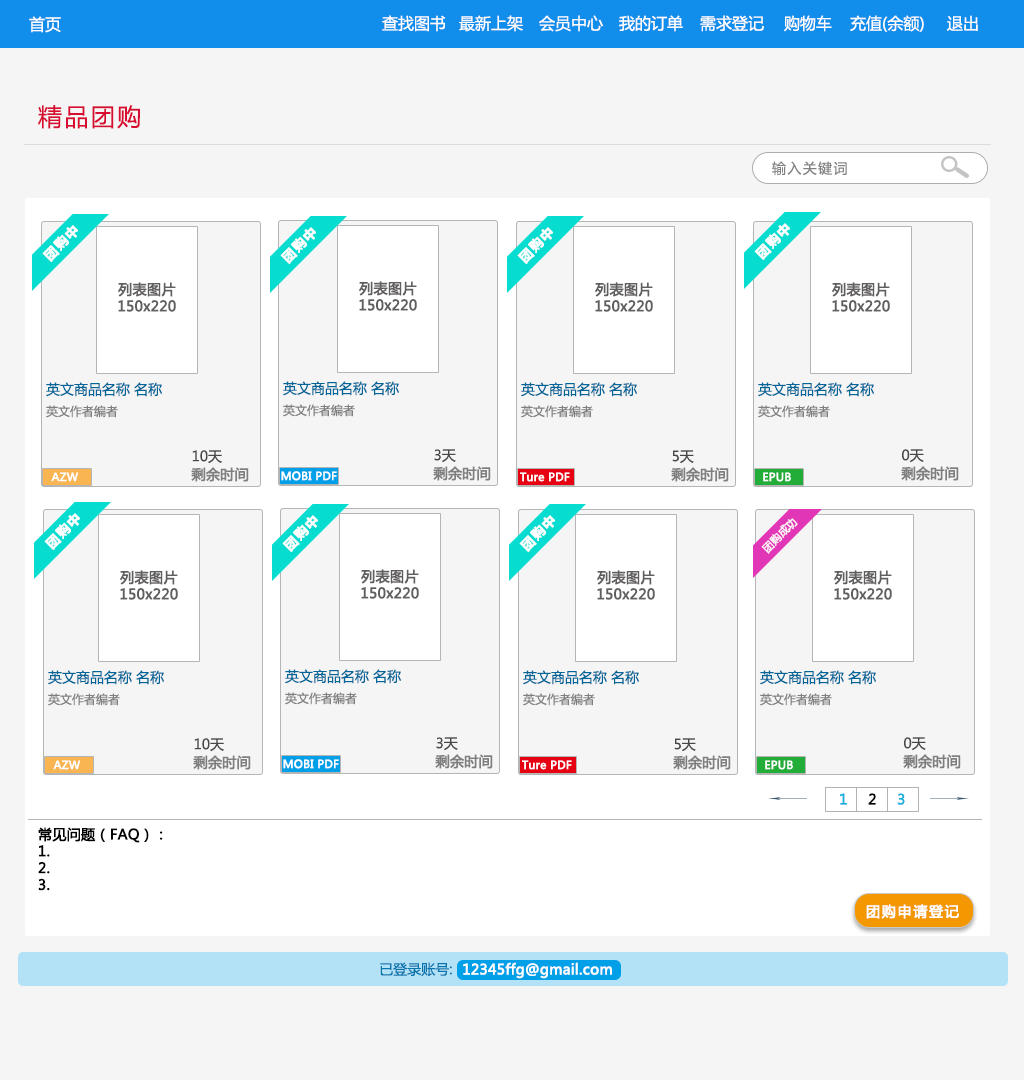
<style>
.page{position:relative;width:1024px;height:1080px;background:#f5f5f5}
.page>*{position:absolute;margin:0}
.t1{font:16px "MicrosoftYaHei";color:#ffffff}
.t2{font:24px "MicrosoftYaHei";letter-spacing:0.1em;color:#d70c30}
.t3{font:14px "MicrosoftYaHei";letter-spacing:0.1em;color:#828282}
.t4{font:13px "MicrosoftYaHei-Bold";letter-spacing:0.1em;color:#fefefe;font-weight:bold}
.t5{font:14px "MicrosoftYaHei";color:#615e5e;font-weight:bold}
.t6{font:14px "MicrosoftYaHei";color:#006699}
.t7{font:12px "MicrosoftYaHei";color:#7e7e7e}
.t8{font:14px "MicrosoftYaHei";color:#474747}
.t9{font:11px "MicrosoftYaHei";color:#ffffff;font-weight:bold}
.t10{font:14px "MicrosoftYaHei";color:#807f7f;font-weight:bold}
.t11{font:10.6px "MicrosoftYaHei";color:#fdfafa;font-weight:bold}
.t12{font:14px "MicrosoftYaHei";color:#19b0dc;font-weight:bold}
.t13{font:14px "MicrosoftYaHei";color:#000000;font-weight:bold}
.t14{font:14px "MicrosoftYaHei";letter-spacing:0.1em;color:#ffffff;font-weight:bold}
.t15{font:14px "MicrosoftYaHei";color:#0875ae}
.t16{font:14px "MicrosoftYaHei";color:#ffffff;font-weight:bold}
</style>
<div class="page">
<p class="t1" style="left:29px;top:16px;width:32px;height:17px">首页</p>
<p class="t1" style="left:382px;top:15px;width:64px;height:17px">查找图书</p>
<p class="t1" style="left:459px;top:15px;width:64px;height:17px">最新上架</p>
<p class="t1" style="left:539px;top:15px;width:64px;height:17px">会员中心</p>
<p class="t1" style="left:619px;top:15px;width:64px;height:17px">我的订单</p>
<p class="t1" style="left:700px;top:15px;width:64px;height:17px">需求登记</p>
<p class="t1" style="left:784px;top:15px;width:48px;height:17px">购物车</p>
<p class="t1" style="left:850px;top:15px;width:74px;height:17px">充值(余额)</p>
<p class="t1" style="left:947px;top:15px;width:31px;height:16px">退出</p>
<p class="t2" style="left:38px;top:105px;width:102px;height:24px">精品团购</p>
<p class="t3" style="left:772px;top:161px;width:75px;height:15px">输入关键词</p>
<p class="t4" style="left:42px;top:225px;width:36px;height:37px;rotate:-45deg">团购中</p>
<p class="t4" style="left:280px;top:227px;width:36px;height:37px;rotate:-45deg">团购中</p>
<p class="t4" style="left:517px;top:227px;width:36px;height:37px;rotate:-45deg">团购中</p>
<p class="t4" style="left:754px;top:223px;width:36px;height:37px;rotate:-45deg">团购中</p>
<p class="t5" style="left:359px;top:281px;width:58px;height:30px;text-align:center">列表图片<br>150x220</p>
<p class="t5" style="left:118px;top:282px;width:58px;height:30px;text-align:center">列表图片<br>150x220</p>
<p class="t5" style="left:595px;top:282px;width:58px;height:30px;text-align:center">列表图片<br>150x220</p>
<p class="t5" style="left:832px;top:282px;width:58px;height:30px;text-align:center">列表图片<br>150x220</p>
<p class="t6" style="left:46px;top:382px;width:116px;height:15px">英文商品名称 名称</p>
<p class="t6" style="left:283px;top:381px;width:116px;height:15px">英文商品名称 名称</p>
<p class="t6" style="left:521px;top:382px;width:116px;height:15px">英文商品名称 名称</p>
<p class="t6" style="left:758px;top:382px;width:116px;height:15px">英文商品名称 名称</p>
<p class="t7" style="left:46px;top:405px;width:72px;height:13px">英文作者编者</p>
<p class="t7" style="left:283px;top:404px;width:72px;height:13px">英文作者编者</p>
<p class="t7" style="left:521px;top:405px;width:72px;height:13px">英文作者编者</p>
<p class="t7" style="left:758px;top:405px;width:72px;height:13px">英文作者编者</p>
<p class="t8" style="left:434px;top:449px;width:22px;height:14px">3天</p>
<p class="t8" style="left:902px;top:449px;width:22px;height:14px">0天</p>
<p class="t8" style="left:192px;top:450px;width:30px;height:14px">10天</p>
<p class="t8" style="left:672px;top:450px;width:22px;height:14px">5天</p>
<p class="t9" style="left:51px;top:472px;width:28px;height:10px">AZW</p>
<p class="t10" style="left:191px;top:467px;width:58px;height:15px">剩余时间</p>
<p class="t9" style="left:281px;top:471px;width:56px;height:10px">MOBI PDF</p>
<p class="t10" style="left:433px;top:466px;width:58px;height:15px">剩余时间</p>
<p class="t9" style="left:520px;top:472px;width:50px;height:10px">Ture PDF</p>
<p class="t10" style="left:671px;top:467px;width:58px;height:15px">剩余时间</p>
<p class="t9" style="left:763px;top:472px;width:28px;height:10px">EPUB</p>
<p class="t10" style="left:901px;top:466px;width:58px;height:15px">剩余时间</p>
<p class="t4" style="left:44px;top:513px;width:36px;height:37px;rotate:-45deg">团购中</p>
<p class="t4" style="left:282px;top:515px;width:36px;height:37px;rotate:-45deg">团购中</p>
<p class="t4" style="left:519px;top:515px;width:36px;height:37px;rotate:-45deg">团购中</p>
<p class="t11" style="left:761px;top:518px;width:37px;height:36px;rotate:-45deg">团购成功</p>
<p class="t5" style="left:361px;top:569px;width:58px;height:30px;text-align:center">列表图片<br>150x220</p>
<p class="t5" style="left:120px;top:570px;width:58px;height:30px;text-align:center">列表图片<br>150x220</p>
<p class="t5" style="left:597px;top:570px;width:58px;height:30px;text-align:center">列表图片<br>150x220</p>
<p class="t5" style="left:834px;top:570px;width:58px;height:30px;text-align:center">列表图片<br>150x220</p>
<p class="t6" style="left:48px;top:670px;width:116px;height:15px">英文商品名称 名称</p>
<p class="t6" style="left:285px;top:669px;width:116px;height:15px">英文商品名称 名称</p>
<p class="t6" style="left:523px;top:670px;width:116px;height:15px">英文商品名称 名称</p>
<p class="t6" style="left:760px;top:670px;width:116px;height:15px">英文商品名称 名称</p>
<p class="t7" style="left:48px;top:693px;width:72px;height:13px">英文作者编者</p>
<p class="t7" style="left:285px;top:692px;width:72px;height:13px">英文作者编者</p>
<p class="t7" style="left:523px;top:693px;width:72px;height:13px">英文作者编者</p>
<p class="t7" style="left:760px;top:693px;width:72px;height:13px">英文作者编者</p>
<p class="t8" style="left:436px;top:737px;width:22px;height:14px">3天</p>
<p class="t8" style="left:904px;top:737px;width:22px;height:14px">0天</p>
<p class="t8" style="left:194px;top:738px;width:30px;height:14px">10天</p>
<p class="t8" style="left:674px;top:738px;width:22px;height:14px">5天</p>
<p class="t9" style="left:53px;top:760px;width:28px;height:10px">AZW</p>
<p class="t10" style="left:193px;top:755px;width:58px;height:15px">剩余时间</p>
<p class="t9" style="left:283px;top:759px;width:56px;height:10px">MOBI PDF</p>
<p class="t10" style="left:435px;top:754px;width:58px;height:15px">剩余时间</p>
<p class="t9" style="left:522px;top:760px;width:50px;height:10px">Ture PDF</p>
<p class="t10" style="left:673px;top:755px;width:58px;height:15px">剩余时间</p>
<p class="t9" style="left:765px;top:760px;width:28px;height:10px">EPUB</p>
<p class="t10" style="left:903px;top:754px;width:58px;height:15px">剩余时间</p>
<p class="t12" style="left:840px;top:793px;width:7px;height:12px">1</p>
<p class="t13" style="left:868px;top:793px;width:8px;height:12px">2</p>
<p class="t12" style="left:897px;top:793px;width:8px;height:12px">3</p>
<p class="t13" style="left:38px;top:827px;width:125px;height:64px">常见问题（FAQ）：<br>1.<br>2.<br>3.</p>
<p class="t14" style="left:866px;top:904px;width:93px;height:15px">团购申请登记</p>
<p class="t15" style="left:380px;top:962px;width:72px;height:15px">已登录账号:</p>
<p class="t16" style="left:463px;top:962px;width:149px;height:17px">12345ffg@gmail.com</p>
</div>
